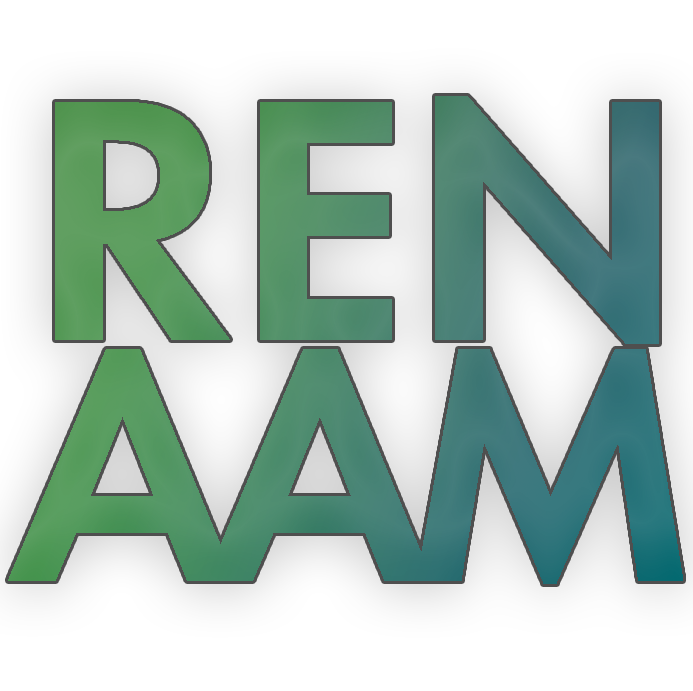
<style>
.page{position:relative;width:693px;height:691px}
.page>*{position:absolute;margin:0}
.t1{font:314px "AlliesMorrisonFuturaND-Bold";color:#52906a}
.t2{font:300px "AlliesMorrisonFuturaND-Bold";letter-spacing:-0.1em}
</style>
<div class="page">
<p class="t1" style="left:55px;top:96px;width:604px;height:248px">REN</p>
<p class="t2" style="left:8px;top:349px;width:675px;height:235px">AAM</p>
</div>
